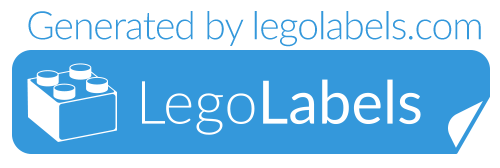
<style>
.page{position:relative;width:500px;height:168px;background:#3498db}
.page>*{position:absolute;margin:0}
.t1{font:39px "Lato-Light";letter-spacing:-0.025em;color:#3498db}
</style>
<div class="page">
<p class="t1" style="left:28px;top:11px;width:453px;height:36px">Generated by legolabels.com</p>
</div>
